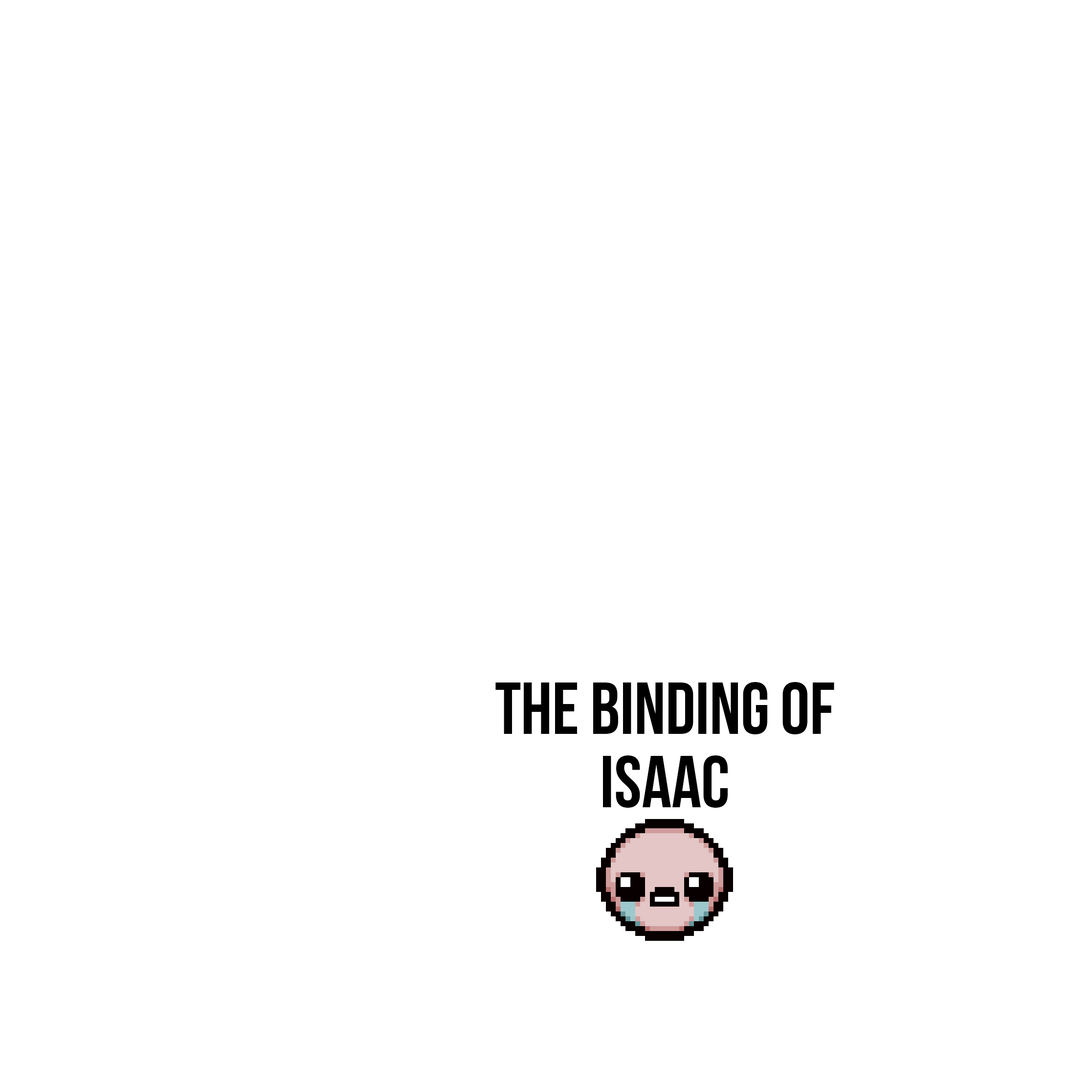
<style>
.page{position:relative;width:1092px;height:1092px;background:#ffffff}
.page>*{position:absolute;margin:0}
.t1{font:73.4px/73.4px "BebasNeue";color:#000000}
</style>
<div class="page">
<p class="t1" style="left:495px;top:682px;width:339px;height:126px;text-align:center">the binding of<br>isaac</p>
</div>
